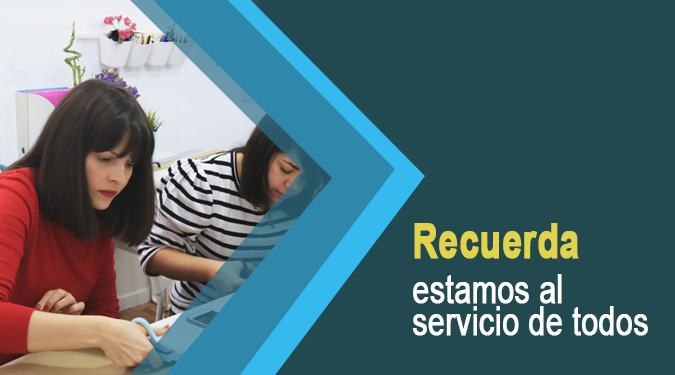
<style>
.page{position:relative;width:675px;height:375px;background:#224950}
.page>*{position:absolute;margin:0}
.t1{font:47.6px "Arial-BoldMT";color:#e2d34d;font-weight:bold;scale:0.74 1}
.t2{font:40.3px "ArialMT";color:#ffffff;font-weight:bold;scale:0.74 1}
.t3{font:40.3px "ArialMT";color:#fefefe;font-weight:bold;scale:0.74 1}
</style>
<div class="page">
<p class="t1" style="left:414px;top:223px;width:165px;height:36px">Recuerda</p>
<p class="t2" style="left:413px;top:274px;width:149px;height:30px">estamos al</p>
<p class="t3" style="left:413px;top:306px;width:235px;height:30px">servicio de todos</p>
</div>
